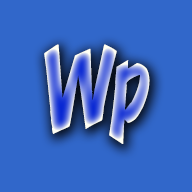
<style>
.page{position:relative;width:192px;height:192px;background:#3167ca}
.page>*{position:absolute;margin:0}
.t1{font:121px "Frosty'sWinterland"}
</style>
<div class="page">
<p class="t1" style="left:44px;top:44px;width:106px;height:100px">Wp</p>
</div>
